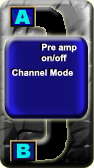
<style>
.page{position:relative;width:94px;height:168px}
.page>*{position:absolute;margin:0}
.t1{font:9px "Arial-BoldMT";color:#fdfafe}
.t2{font:9px "Arial-BoldMT";color:#fbf7fd}
</style>
<div class="page">
<p class="t1" style="left:41px;top:43px;width:36px;height:19px">Pre amp<br>on/off</p>
<p class="t2" style="left:12px;top:69px;width:61px;height:7px">Channel Mode</p>
</div>
